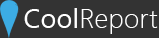
<style>
.page{position:relative;width:159px;height:38px;background:#333333}
.page>*{position:absolute;margin:0}
.t1{font:27px "SegoeUI-Light";letter-spacing:0.01em;color:#ffffff}
.t2{font:27px "SegoeUI";letter-spacing:0.01em;color:#ffffff}
</style>
<div class="page">
<p class="t1" style="left:24px;top:8px;width:134px;height:26px"><span class="t2">Cool</span>Report</p>
</div>
